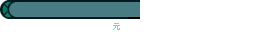
<style>
.page{position:relative;width:256px;height:32px;background:#ffffff}
.page>*{position:absolute;margin:0}
.t1{font:8px "Zfull-GB";letter-spacing:0.045em;color:#4cf690}
</style>
<div class="page">
<p class="t1" style="left:113px;top:23px;width:7px;height:7px">元</p>
</div>
